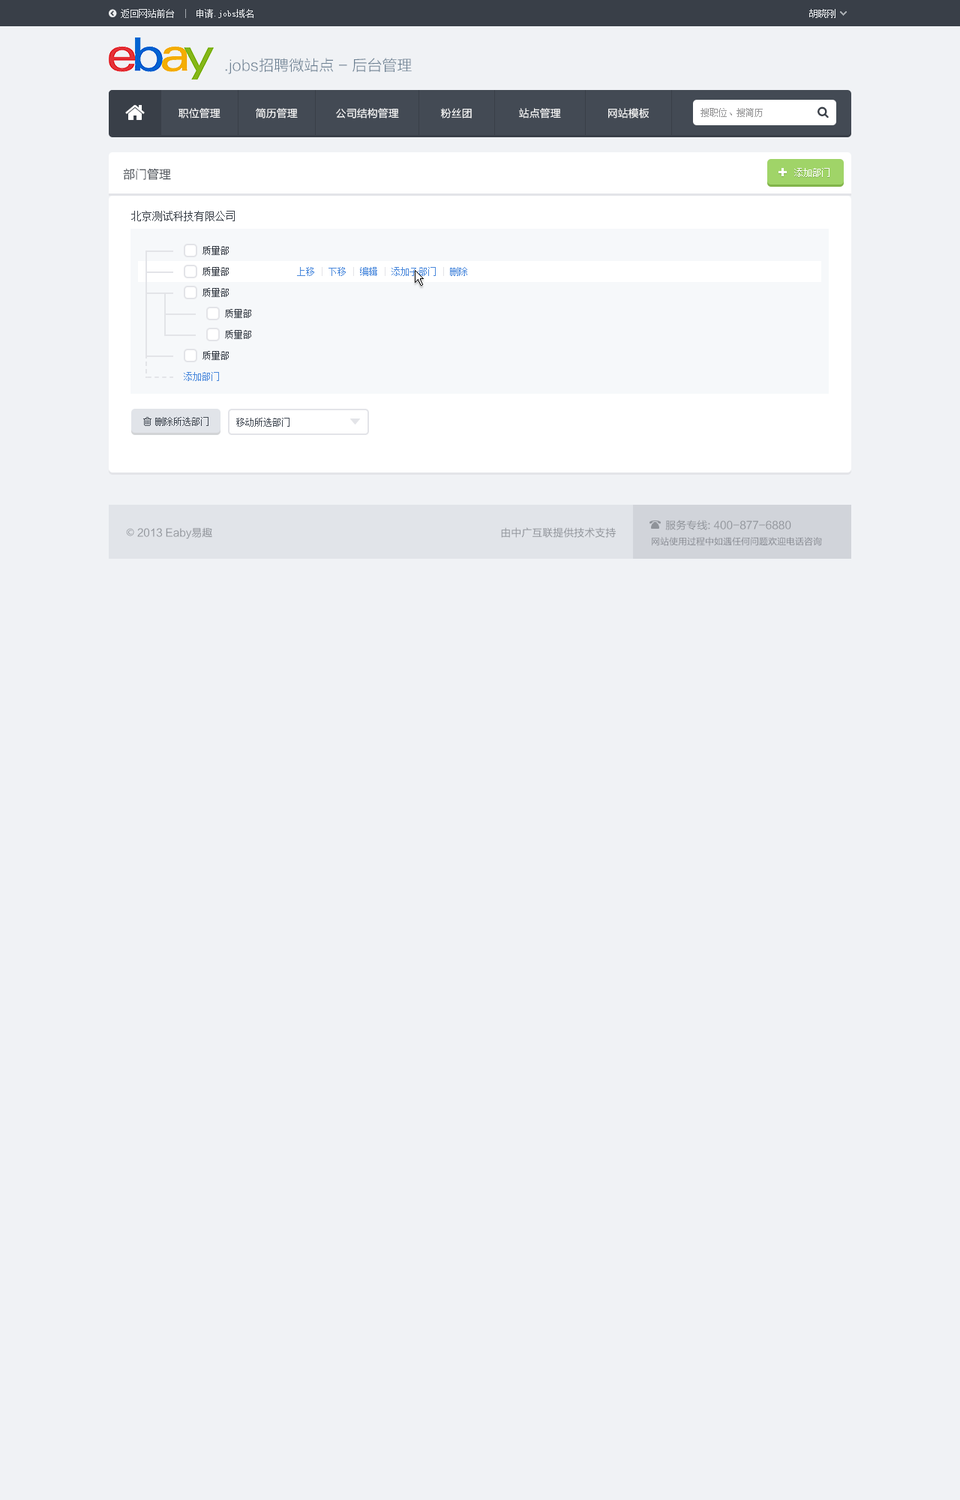
<style>
.page{position:relative;width:960px;height:1500px;background:#f0f2f5}
.page>*{position:absolute;margin:0}
.t1{font:9px "SimSun";color:#eceef0}
.t2{font:15px "FZLTXHK";color:#6c8092}
.t3{font:10.5px "FZLTXHK";color:#ffffff}
.t4{font:9px "SimSun";color:#959596}
.t5{font:12px "FZLTXHK";color:#393f48}
.t6{font:9px "SimSun";color:#ffffff}
.t7{font:10.5px "SimSun";color:#393f48}
.t8{font:9px "SimSun";color:#393f48}
.t9{font:9px "SimSun";color:#4b89dc}
.t10{font:9px "SimSun";color:#e3e4e8}
.t11{font:9px "SimSun";color:#434a54}
.t12{font:10.5px "FZLTHK--GBK1-0";color:#8f9399}
.t13{font:10.5px "AdobeHeitiStd-Regular";color:#8f9399}
.t14{font:9px "FZLTHJW--GB1-0";color:#868990}
</style>
<div class="page">
<p class="t1" style="left:121px;top:9px;width:133px;height:9px">返回网站前台 申请.jobs域名</p>
<p class="t1" style="left:809px;top:9px;width:27px;height:9px">胡晓刚</p>
<p class="t2" style="left:225px;top:58px;width:187px;height:16px">.jobs招聘微站点 - 后台管理</p>
<p class="t3" style="left:178px;top:108px;width:42px;height:10px">职位管理</p>
<p class="t3" style="left:256px;top:108px;width:42px;height:10px">简历管理</p>
<p class="t3" style="left:336px;top:108px;width:63px;height:10px">公司结构管理</p>
<p class="t3" style="left:441px;top:108px;width:31px;height:10px">粉丝团</p>
<p class="t3" style="left:519px;top:108px;width:42px;height:10px">站点管理</p>
<p class="t3" style="left:608px;top:108px;width:41px;height:10px">网站模板</p>
<p class="t4" style="left:700px;top:108px;width:63px;height:9px">搜职位、搜简历</p>
<p class="t5" style="left:123px;top:168px;width:48px;height:12px">部门管理</p>
<p class="t6" style="left:794px;top:168px;width:36px;height:9px">添加部门</p>
<p class="t7" style="left:131px;top:211px;width:104px;height:10px">北京测试科技有限公司</p>
<p class="t8" style="left:202px;top:246px;width:27px;height:9px">质量部</p>
<p class="t8" style="left:202px;top:267px;width:27px;height:9px">质量部</p>
<p class="t9" style="left:297px;top:267px;width:170px;height:9px">上移 <span class="t10">|</span> 下移 <span class="t10">|</span> 编辑 <span class="t10">|</span> 添加子部门 <span class="t10">|</span> 删除</p>
<p class="t8" style="left:202px;top:288px;width:27px;height:9px">质量部</p>
<p class="t8" style="left:225px;top:309px;width:26px;height:9px">质量部</p>
<p class="t8" style="left:225px;top:330px;width:26px;height:9px">质量部</p>
<p class="t8" style="left:202px;top:351px;width:27px;height:9px">质量部</p>
<p class="t9" style="left:184px;top:372px;width:35px;height:9px">添加部门</p>
<p class="t11" style="left:155px;top:417px;width:53px;height:9px">删除所选部门</p>
<p class="t11" style="left:236px;top:418px;width:54px;height:9px">移动所选部门</p>
<p class="t12" style="left:665px;top:520px;width:126px;height:10px">服务专线: 400-877-6880</p>
<p class="t12" style="left:126px;top:527px;width:86px;height:12px"><span class="t13">©</span> 2013 Eaby易趣</p>
<p class="t12" style="left:501px;top:527px;width:115px;height:11px">由中广互联提供技术支持</p>
<p class="t14" style="left:652px;top:537px;width:170px;height:9px">网站使用过程中如遇任何问题欢迎电话咨询</p>
</div>
